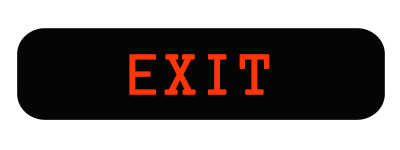
<style>
.page{position:relative;width:400px;height:150px;background:#050505}
.page>*{position:absolute;margin:0}
.t1{font:50px "Anonymous";letter-spacing:0.05em;color:#fe3509;font-weight:bold}
</style>
<div class="page">
<p class="t1" style="left:129px;top:54px;width:141px;height:41px">EXIT</p>
</div>
